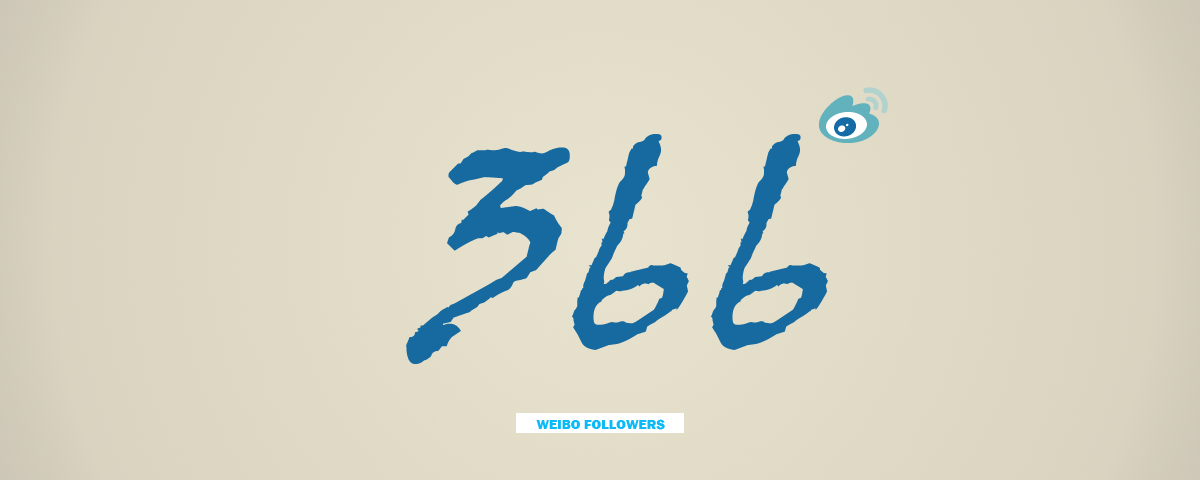
<style>
.page{position:relative;width:1200px;height:480px}
.page>*{position:absolute;margin:0}
.t1{font:300px "VinerHandITC";color:#176aa0}
.t2{font:14px "FranklinGothic-Heavy";color:#0cbaf7}
</style>
<div class="page">
<p class="t1" style="left:406px;top:134px;width:422px;height:230px">366</p>
<p class="t2" style="left:536px;top:419px;width:129px;height:11px">WEIBO FOLLOWERS</p>
</div>
